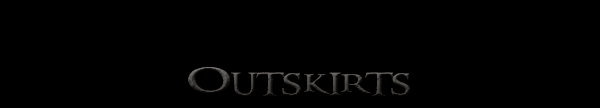
<style>
.page{position:relative;width:600px;height:108px;background:#000000}
.page>*{position:absolute;margin:0}
.t1{font:31.1px "RingbearerMedium";letter-spacing:0.04em;font-variant:small-caps;scale:1.55 1}
</style>
<div class="page">
<p class="t1" style="left:188px;top:67px;width:222px;height:29px">Outskirts</p>
<p class="t1" style="left:188px;top:67px;width:222px;height:29px">Outskirts</p>
</div>
